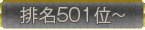
<style>
.page{position:relative;width:145px;height:30px}
.page>*{position:absolute;margin:0}
.t1{font:18px "GothicMB101Pr6N-Light";color:#c5baaf}
</style>
<div class="page">
<p class="t1" style="left:20px;top:6px;width:105px;height:18px">排名501位~</p>
</div>
